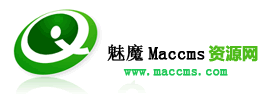
<style>
.page{position:relative;width:270px;height:112px;background:#ffffff}
.page>*{position:absolute;margin:0}
.t1{font:18px "SimSun";color:#000000;font-weight:bold}
.t2{font:14px "SimSun";color:#20c857;font-weight:bold}
</style>
<div class="page">
<p class="t1" style="left:107px;top:44px;width:98px;height:18px">魅魔Maccms</p>
<p class="t2" style="left:123px;top:69px;width:105px;height:7px">www.maccms.com</p>
</div>
